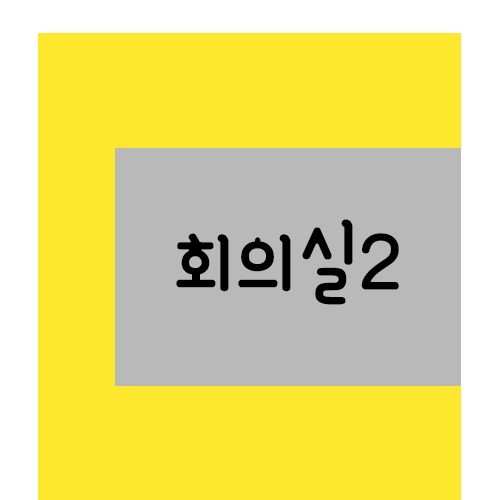
<style>
.page{position:relative;width:500px;height:500px;background:#fee82d}
.page>*{position:absolute;margin:0}
.t1{font:100px "YanoljaYacheR";color:#000000}
</style>
<div class="page">
<p class="t1" style="left:176px;top:219px;width:223px;height:86px">회의실2</p>
</div>
